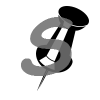
<style>
.page{position:relative;width:100px;height:100px;background:#ffffff}
.page>*{position:absolute;margin:0}
.t1{font:76px "ComicSansMS-BoldItalic";color:#6d6d6d}
</style>
<div class="page">
<p class="t1" style="left:21px;top:17px;width:52px;height:59px;opacity:0.86">S</p>
</div>
